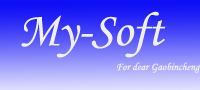
<style>
.page{position:relative;width:200px;height:90px}
.page>*{position:absolute;margin:0}
.t1{font:48px "STLiti";color:#f1eff6}
.t2{font:10.7px "STLiti";color:#f1eff6}
</style>
<div class="page">
<p class="t1" style="left:21px;top:11px;width:145px;height:47px">My-Soft</p>
<p class="t2" style="left:117px;top:62px;width:83px;height:11px">For dear Gaobincheng</p>
</div>
